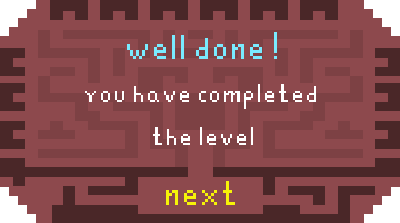
<style>
.page{position:relative;width:400px;height:223px;background:#8d494d}
.page>*{position:absolute;margin:0}
.t1{font:36px "Pixel-MYZ";color:#ffffff}
.t2{font:48px "Pixel-MYZ";color:#79ebff}
.t3{font:48px "Pixel-MYZ";color:#f6f309}
</style>
<div class="page">
<p class="t1" style="left:85px;top:32px;width:231px;height:113px;text-align:center"><span class="t2">well done!<br></span>you have completed <br>the level</p>
<p class="t3" style="left:166px;top:181px;width:69px;height:24px">next</p>
</div>
